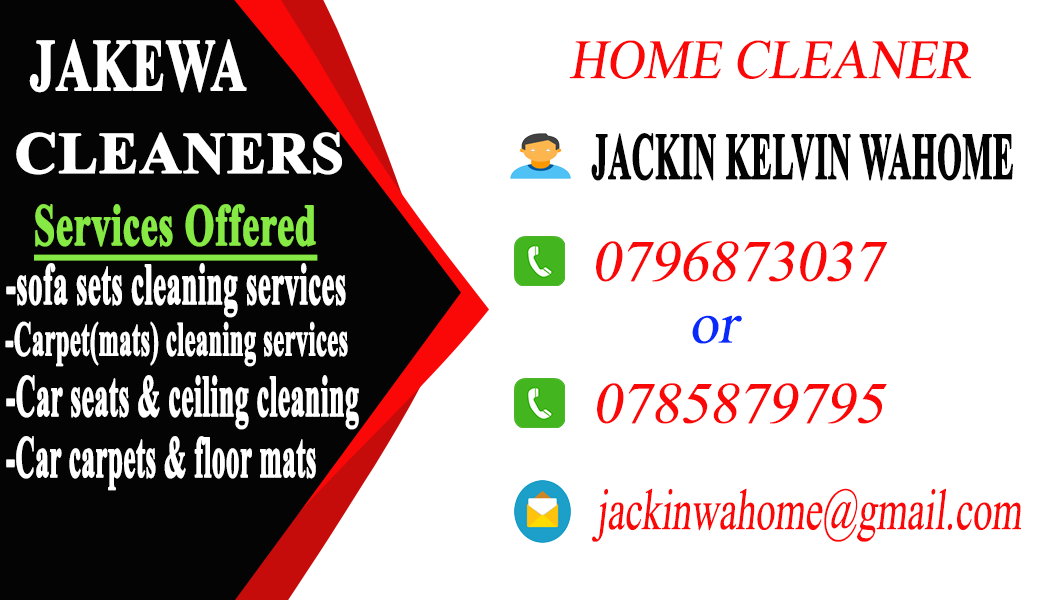
<style>
.page{position:relative;width:1050px;height:600px;background:#ffffff}
.page>*{position:absolute;margin:0}
.t1{font:125.8px "TimesNewRomanPS-BoldMT";color:#ffffff;font-weight:bold;scale:0.67 1}
.t2{font:95px "TimesNewRomanPSMT";color:#fa0808;font-style:italic;scale:0.93 1}
.t3{font:100px "TimesNewRomanPS-BoldMT";color:#ffffff;font-weight:bold}
.t4{font:112.5px "TimesNewRomanPS-BoldMT";color:#040404;font-weight:bold;scale:0.48 1}
.t5{font:100.7px "TimesNewRomanPS-BoldMT";color:#86e944;font-weight:bold;text-decoration:underline;scale:0.64 1}
.t6{font:100px "TimesNewRomanPSMT";color:#fa0808;font-style:italic}
.t7{font:100.7px "TimesNewRomanPS-BoldMT";color:#ffffff;font-weight:bold;scale:0.48 1}
.t8{font:100px "TimesNewRomanPSMT";color:#082afa;font-style:italic}
.t9{font:82.9px "TimesNewRomanPS-BoldMT";color:#ffffff;font-weight:bold;scale:0.5 1}
.t10{font:100.7px "TimesNewRomanPS-BoldMT";color:#ffffff;font-weight:bold;scale:0.46 1}
.t11{font:100.7px "TimesNewRomanPS-BoldMT";color:#ffffff;font-weight:bold;scale:0.45 1}
.t12{font:99.5px "TimesNewRomanPSMT";color:#fa0808;font-style:italic;scale:0.67 1}
</style>
<div class="page">
<p class="t1" style="left:29px;top:39px;width:218px;height:54px">JAKEWA</p>
<p class="t2" style="left:569px;top:40px;width:402px;height:39px">HOME CLEANER</p>
<p class="t3" style="left:16px;top:132px;width:326px;height:43px">CLEANERS</p>
<p class="t4" style="left:591px;top:133px;width:422px;height:48px">JACKIN KELVIN WAHOME</p>
<p class="t5" style="left:34px;top:204px;width:284px;height:57px">Services Offered</p>
<p class="t6" style="left:596px;top:241px;width:291px;height:41px">0796873037</p>
<p class="t7" style="left:6px;top:263px;width:340px;height:55px">-sofa sets cleaning services</p>
<p class="t8" style="left:692px;top:315px;width:50px;height:29px">or</p>
<p class="t9" style="left:5px;top:321px;width:343px;height:46px">-Carpet(mats) cleaning services</p>
<p class="t10" style="left:6px;top:375px;width:353px;height:55px">-Car seats &amp; ceiling cleaning</p>
<p class="t6" style="left:597px;top:383px;width:290px;height:41px">0785879795</p>
<p class="t11" style="left:6px;top:436px;width:310px;height:55px">-Car carpets &amp; floor mats</p>
<p class="t12" style="left:592px;top:488px;width:429px;height:54px">jackinwahome@gmail.com</p>
</div>
